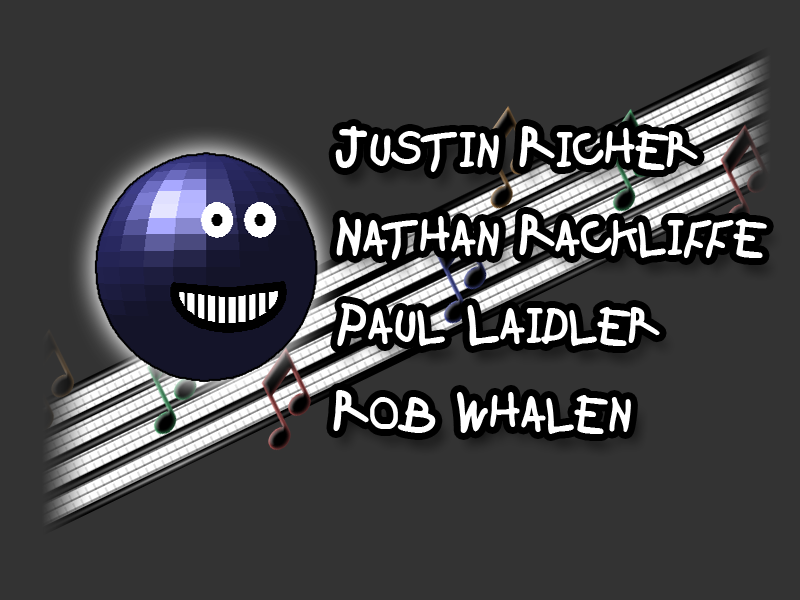
<style>
.page{position:relative;width:800px;height:600px;background:#333333}
.page>*{position:absolute;margin:0}
.t1{font:42px/88px "KidzOnlyTooSSKBold";color:#ffffff}
.t2{font:48px/88px "KidzOnlyTooSSKBold";color:#ffffff}
</style>
<div class="page">
<p class="t1" style="left:333px;top:126px;width:434px;height:308px"><span class="t2">J</span>USTIN <span class="t2">R</span>ICHER<br><span class="t2">N</span>ATHAN <span class="t2">R</span>ACKLIFFE<br><span class="t2">P</span>AUL <span class="t2">L</span>AIDLER<br><span class="t2">R</span>OB <span class="t2">W</span>HALEN</p>
</div>
